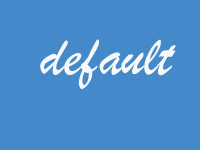
<style>
.page{position:relative;width:200px;height:150px;background:#4489c9}
.page>*{position:absolute;margin:0}
.t1{font:58.3px "STXingkai";color:#f7f9fa}
</style>
<div class="page">
<p class="t1" style="left:40px;top:39px;width:136px;height:50px">default</p>
</div>
